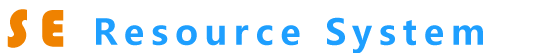
<style>
.page{position:relative;width:558px;height:53px;background:#ffffff}
.page>*{position:absolute;margin:0}
.t1{font:55px "Bauhaus93";letter-spacing:0.2em;color:#ef8200}
.t2{font:35px "MicrosoftYaHeiUI-Bold";letter-spacing:0.2em;color:#1e9fff}
</style>
<div class="page">
<p class="t1" style="left:7px;top:9px;width:57px;height:39px">SE</p>
<p class="t2" style="left:96px;top:17px;width:387px;height:37px">Resource System</p>
</div>
